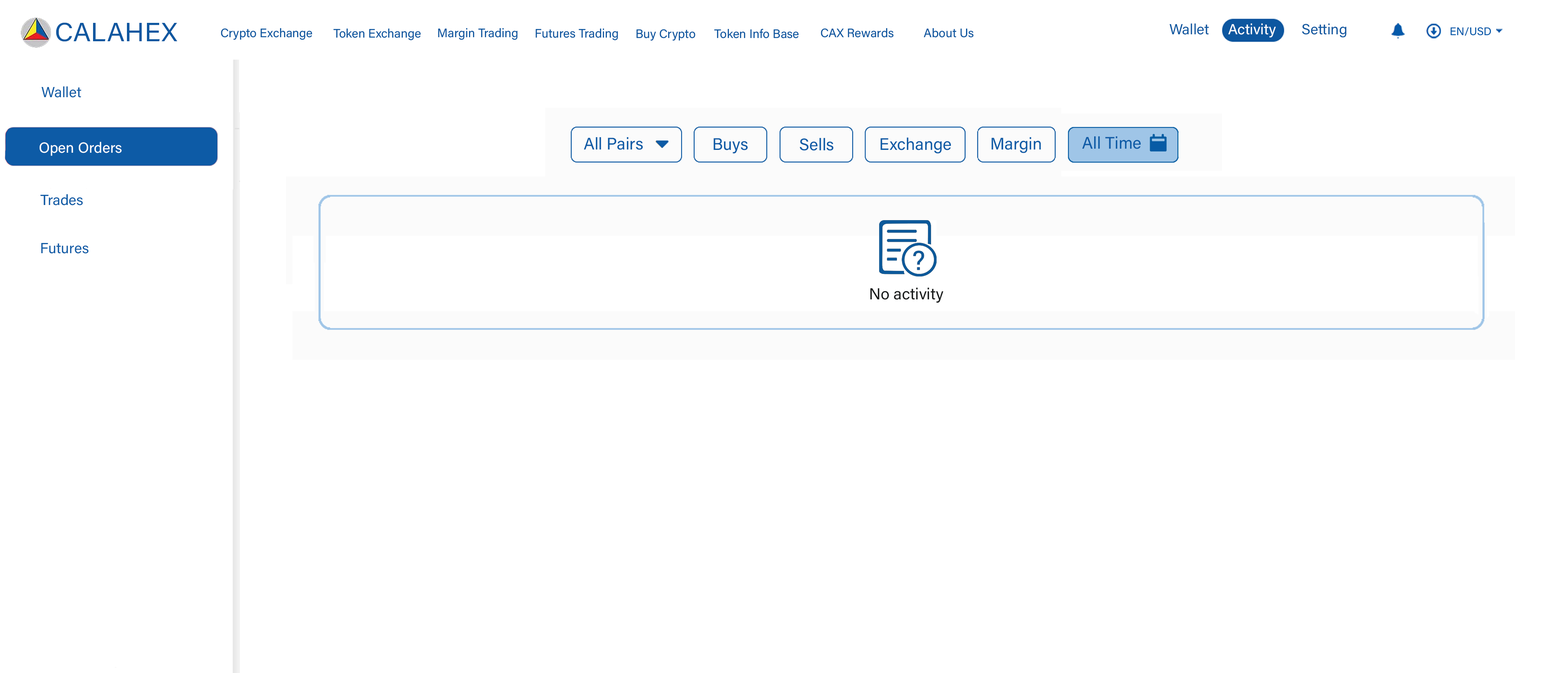
<style>
.page{position:relative;width:1568px;height:673px;background:#ffffff}
.page>*{position:absolute;margin:0}
.t1{font:26.4px "AcuminConcept-Regular";color:#0d57a0;font-style:italic}
.t2{font:12.2px "AcuminConcept-Regular";color:#0d57a0;font-style:italic}
.t3{font:11px "AcuminConcept-Regular";color:#055aaa;font-style:italic}
.t4{font:14.7px "AcuminConcept-Regular";color:#0d5ba6;font-style:italic}
.t5{font:16.7px "AcuminConcept-Regular";color:#0d5ba6;font-style:italic}
.t6{font:14.7px "AcuminConcept-Regular";color:#ffffff;font-style:italic}
.t7{font:15.9px "AcuminConcept-Regular";color:#191b1b;font-style:italic}
</style>
<div class="page">
<p class="t1" style="left:56px;top:22px;width:122px;height:20px">CALAHEX</p>
<p class="t2" style="left:221px;top:28px;width:91px;height:12px">Crypto Exchange</p>
<p class="t2" style="left:333px;top:28px;width:88px;height:12px">Token Exchange</p>
<p class="t2" style="left:438px;top:28px;width:79px;height:12px">Margin Trading</p>
<p class="t2" style="left:535px;top:28px;width:83px;height:12px">Futures Trading</p>
<p class="t2" style="left:636px;top:29px;width:59px;height:12px">Buy Crypto</p>
<p class="t2" style="left:714px;top:29px;width:85px;height:9px">Token Info Base</p>
<p class="t2" style="left:821px;top:28px;width:73px;height:10px">CAX Rewards</p>
<p class="t2" style="left:924px;top:28px;width:50px;height:10px">About Us</p>
<p class="t3" style="left:1450px;top:27px;width:41px;height:9px">EN/USD</p>
<p class="t4" style="left:41px;top:86px;width:40px;height:12px">Wallet</p>
<p class="t5" style="left:584px;top:137px;width:59px;height:13px">All Pairs</p>
<p class="t5" style="left:713px;top:138px;width:35px;height:15px">Buys</p>
<p class="t5" style="left:800px;top:138px;width:33px;height:13px">Sells</p>
<p class="t5" style="left:880px;top:137px;width:71px;height:16px">Exchange</p>
<p class="t5" style="left:991px;top:137px;width:50px;height:16px">Margin</p>
<p class="t5" style="left:1082px;top:136px;width:59px;height:13px">All Time</p>
<p class="t6" style="left:40px;top:142px;width:82px;height:14px">Open Orders</p>
<p class="t4" style="left:40px;top:194px;width:43px;height:11px">Trades</p>
<p class="t4" style="left:41px;top:243px;width:48px;height:10px">Futures</p>
<p class="t7" style="left:870px;top:287px;width:74px;height:16px">No activity</p>
</div>
